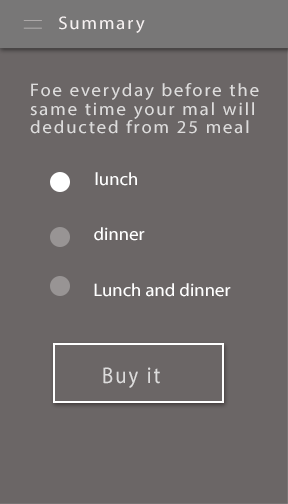
<style>
.page{position:relative;width:288px;height:504px;background:#6b6666}
.page>*{position:absolute;margin:0}
.t1{font:18px "MyriadPro-Regular";letter-spacing:0.1em;color:#f6f1f1;scale:1.04 1}
.t2{font:18px/18.9px "MyriadPro-Regular";letter-spacing:0.1em;color:#dddcdc;scale:1.04 1}
.t3{font:18px "MyriadPro-Regular";color:#ffffff;scale:1.04 1}
.t4{font:23px "MyriadPro-Regular";letter-spacing:0.1em;color:#dddcdc;scale:0.89 1}
</style>
<div class="page">
<p class="t1" style="left:59px;top:16px;width:86px;height:17px">Summary</p>
<p class="t2" style="left:30px;top:83px;width:229px;height:51px">Foe everyday before the<br>same time your mal will <br>deducted from 25 meal</p>
<p class="t3" style="left:95px;top:172px;width:42px;height:14px">lunch</p>
<p class="t3" style="left:94px;top:227px;width:51px;height:14px">dinner</p>
<p class="t3" style="left:94px;top:283px;width:137px;height:14px">Lunch and dinner</p>
<p class="t4" style="left:103px;top:367px;width:57px;height:21px">Buy it</p>
</div>
